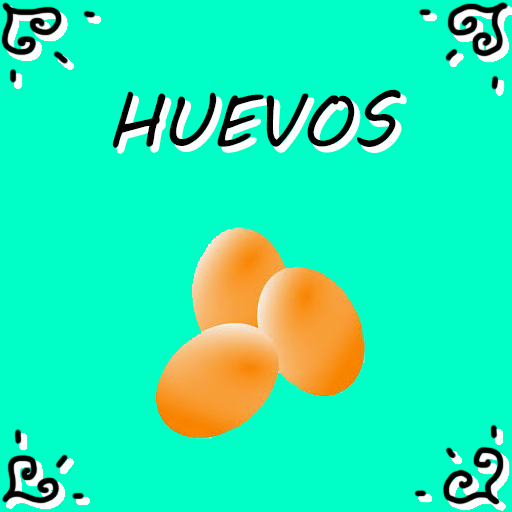
<style>
.page{position:relative;width:512px;height:512px;background:#00ffc6}
.page>*{position:absolute;margin:0}
.t1{font:72px "MVBoli";color:#000000}
</style>
<div class="page">
<p class="t1" style="left:112px;top:89px;width:289px;height:59px">HUEVOS</p>
</div>
